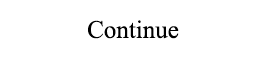
<style>
.page{position:relative;width:266px;height:60px;background:#ffffff}
.page>*{position:absolute;margin:0}
.t1{font:25px "TimesNewRomanPSMT";color:#000000}
</style>
<div class="page">
<p class="t1" style="left:88px;top:20px;width:91px;height:19px">Continue</p>
</div>
